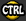
<style>
.page{position:relative;width:26px;height:21px;background:#333333}
.page>*{position:absolute;margin:0}
.t1{font:10px "Hodo";color:#ffffff;font-variant:small-caps;scale:0.85 1}
</style>
<div class="page">
<p class="t1" style="left:2px;top:5px;width:22px;height:10px">CTRL</p>
</div>
